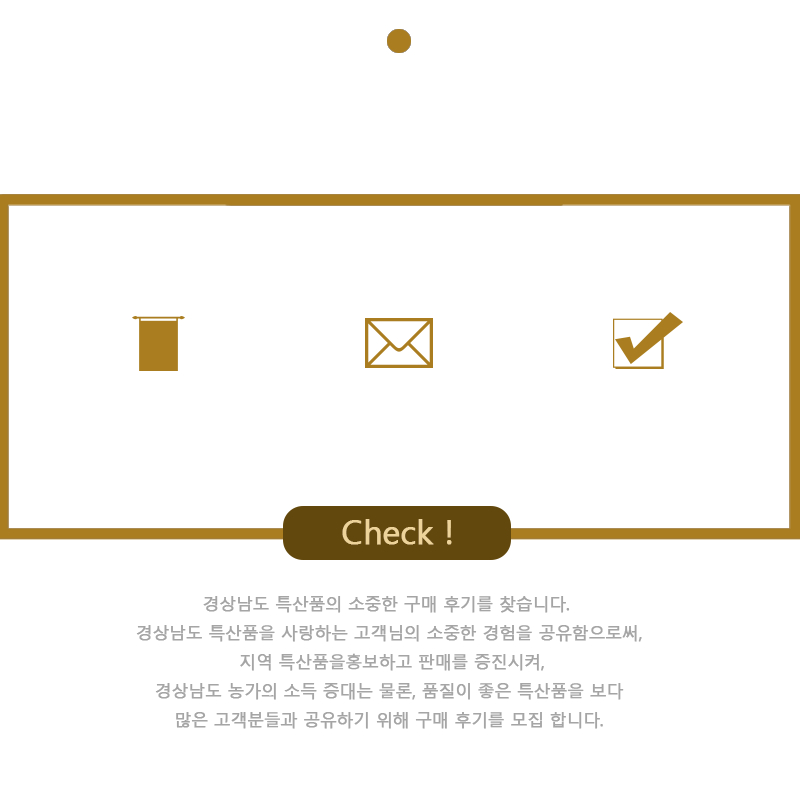
<style>
.page{position:relative;width:800px;height:800px;background:#ffffff}
.page>*{position:absolute;margin:0}
.t1{font:33.3px "MalgunGothic";letter-spacing:-0.025em;color:#edd39a;font-weight:bold}
.t2{font:16.7px "MalgunGothic";letter-spacing:-0.025em;color:#a5a5a5;font-weight:bold}
</style>
<div class="page">
<p class="t1" style="left:342px;top:519px;width:110px;height:26px">Check !</p>
<p class="t2" style="left:136px;top:596px;width:506px;height:133px;text-align:center">경상남도 특산품의 소중한 구매 후기를 찾습니다. <br>경상남도 특산품을 사랑하는 고객님의 소중한 경험을 공유함으로써,<br> 지역 특산품을홍보하고 판매를 증진시켜,<br> 경상남도 농가의 소득 증대는 물론, 품질이 좋은 특산품을 보다 <br>많은 고객분들과 공유하기 위해 구매 후기를 모집 합니다.</p>
</div>
